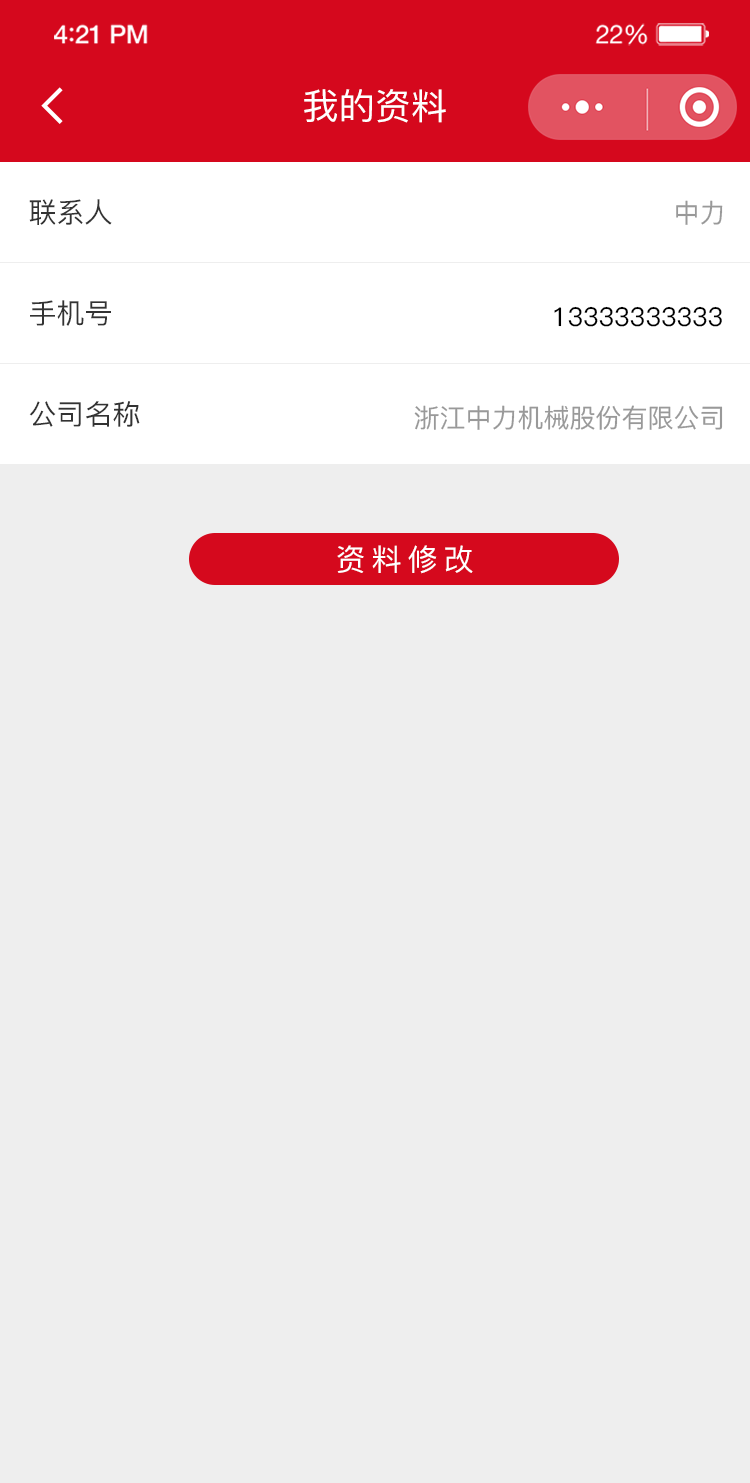
<style>
.page{position:relative;width:750px;height:1483px;background:#eeeeee}
.page>*{position:absolute;margin:0}
.t1{font:36.1px "PingFang-SC-Medium";color:#ffffff}
.t2{font:28px "PingFang-SC-Medium";color:#333333}
.t3{font:26px "PingFang-SC-Medium";color:#999999}
.t4{font:26px "PingFang-SC-Medium";color:#000000}
.t5{font:30px "PingFang-SC-Medium";letter-spacing:0.2em;color:#ffffff}
</style>
<div class="page">
<p class="t1" style="left:304px;top:89px;width:142px;height:34px">我的资料</p>
<p class="t2" style="left:29px;top:199px;width:83px;height:26px">联系人</p>
<p class="t3" style="left:676px;top:200px;width:47px;height:25px">中力</p>
<p class="t2" style="left:30px;top:300px;width:81px;height:26px">手机号</p>
<p class="t4" style="left:554px;top:306px;width:168px;height:21px">13333333333</p>
<p class="t2" style="left:29px;top:401px;width:111px;height:26px">公司名称</p>
<p class="t3" style="left:414px;top:405px;width:309px;height:25px">浙江中力机械股份有限公司</p>
<p class="t5" style="left:337px;top:545px;width:136px;height:29px">资料修改</p>
</div>
